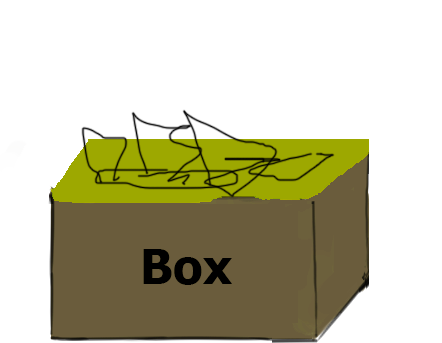
<style>
.page{position:relative;width:442px;height:343px;background:#ffffff}
.page>*{position:absolute;margin:0}
.t1{font:48px "Tahoma-Bold";color:#000000}
</style>
<div class="page">
<p class="t1" style="left:143px;top:249px;width:89px;height:36px">Box</p>
</div>
